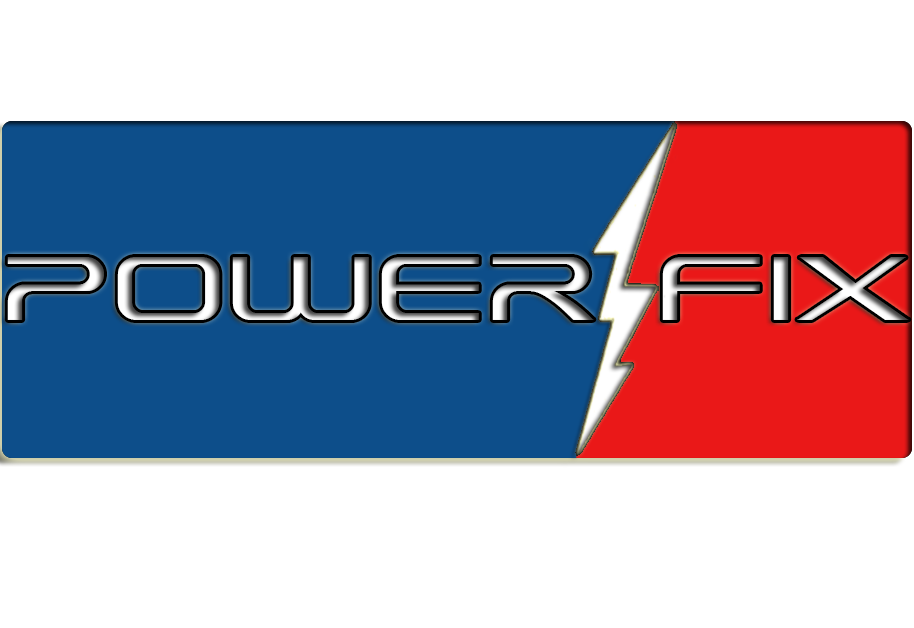
<style>
.page{position:relative;width:914px;height:628px;background:#ffffff}
.page>*{position:absolute;margin:0}
.t1{font:90px "PlayGreat-Bold";scale:1.04 1}
</style>
<div class="page">
<p class="t1" style="left:7px;top:257px;width:902px;height:63px">POWER    FIX</p>
</div>
